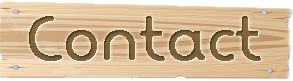
<style>
.page{position:relative;width:293px;height:81px}
.page>*{position:absolute;margin:0}
.t1{font:52.9px "Fabada";letter-spacing:0.007em;color:#7b6037;font-weight:bold}
</style>
<div class="page">
<p class="t1" style="left:29px;top:16px;width:232px;height:45px">Contact</p>
</div>
